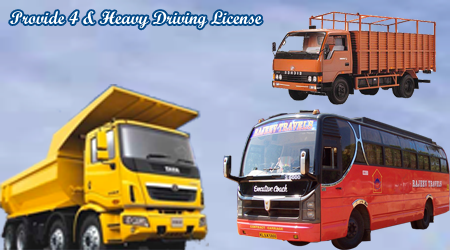
<style>
.page{position:relative;width:450px;height:250px}
.page>*{position:absolute;margin:0}
.t1{font:17.9px "ScriptMTBold";color:#ffffff}
</style>
<div class="page">
<p class="t1" style="left:10px;top:11px;width:252px;height:18px">Provide 4 &amp; Heavy Driving License</p>
</div>
